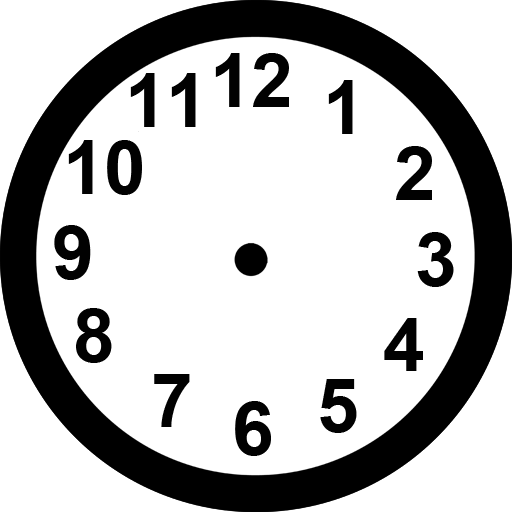
<style>
.page{position:relative;width:512px;height:512px;background:#ffffff}
.page>*{position:absolute;margin:0}
.t1{font:75px "Arial-BoldMT";color:#010101}
</style>
<div class="page">
<p class="t1" style="left:215px;top:53px;width:74px;height:54px">12</p>
<p class="t1" style="left:130px;top:73px;width:66px;height:54px">11</p>
<p class="t1" style="left:328px;top:80px;width:25px;height:54px">1</p>
<p class="t1" style="left:68px;top:140px;width:74px;height:55px">10</p>
<p class="t1" style="left:396px;top:146px;width:36px;height:54px">2</p>
<p class="t1" style="left:54px;top:225px;width:37px;height:55px">9</p>
<p class="t1" style="left:417px;top:232px;width:37px;height:55px">3</p>
<p class="t1" style="left:76px;top:308px;width:36px;height:55px">8</p>
<p class="t1" style="left:384px;top:318px;width:39px;height:53px">4</p>
<p class="t1" style="left:154px;top:374px;width:36px;height:53px">7</p>
<p class="t1" style="left:320px;top:379px;width:37px;height:54px">5</p>
<p class="t1" style="left:235px;top:401px;width:36px;height:55px">6</p>
</div>
